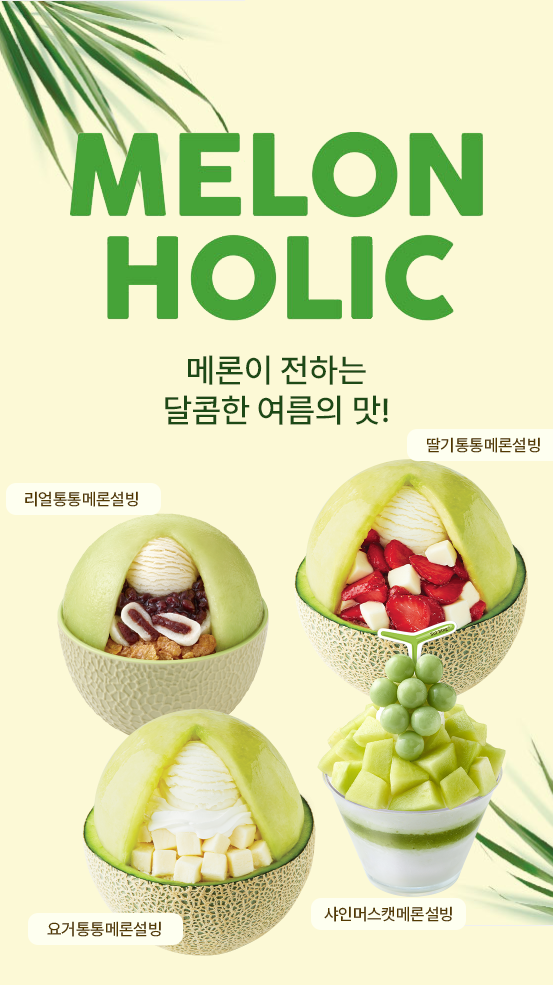
<style>
.page{position:relative;width:553px;height:985px;background:#fcf9d6}
.page>*{position:absolute;margin:0}
.t1{font:33.3px "Pretendard-Medium";color:#1d4916}
.t2{font:16.7px "Pretendard-Medium";color:#533900}
</style>
<div class="page">
<p class="t1" style="left:165px;top:355px;width:223px;height:70px;text-align:center">메론이 전하는<br>달콤한 여름의 맛!</p>
<p class="t2" style="left:427px;top:437px;width:113px;height:16px">딸기통통메론설빙</p>
<p class="t2" style="left:25px;top:491px;width:113px;height:16px">리얼통통메론설빙</p>
<p class="t2" style="left:324px;top:906px;width:128px;height:16px">샤인머스캣메론설빙</p>
<p class="t2" style="left:47px;top:921px;width:114px;height:16px">요거통통메론설빙</p>
</div>
